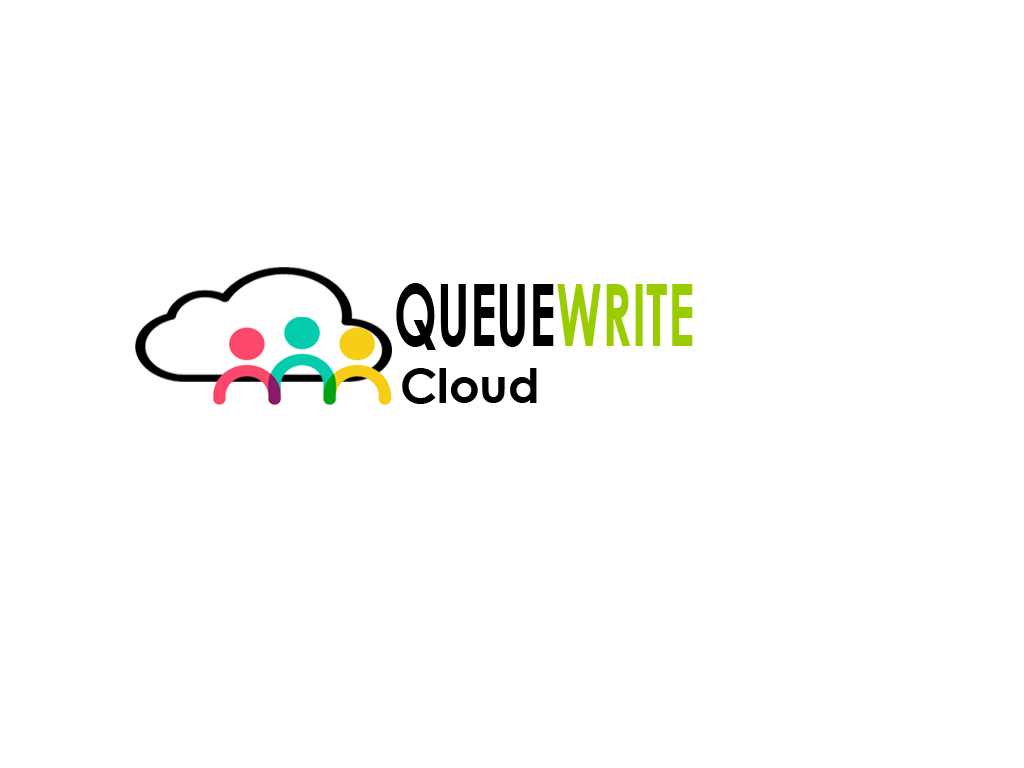
<style>
.page{position:relative;width:1024px;height:768px;background:#ffffff}
.page>*{position:absolute;margin:0}
.t1{font:85.5px "CenturyGothic-Bold";color:#000000;scale:0.6 1}
.t2{font:85.5px "CenturyGothic-Bold";color:#99cc01;scale:0.6 1}
.t3{font:48px "CenturyGothic-Bold";color:#000000}
</style>
<div class="page">
<p class="t1" style="left:396px;top:283px;width:297px;height:67px">QUEUE<span class="t2">WRITE</span></p>
<p class="t3" style="left:402px;top:368px;width:135px;height:36px">Cloud</p>
</div>
